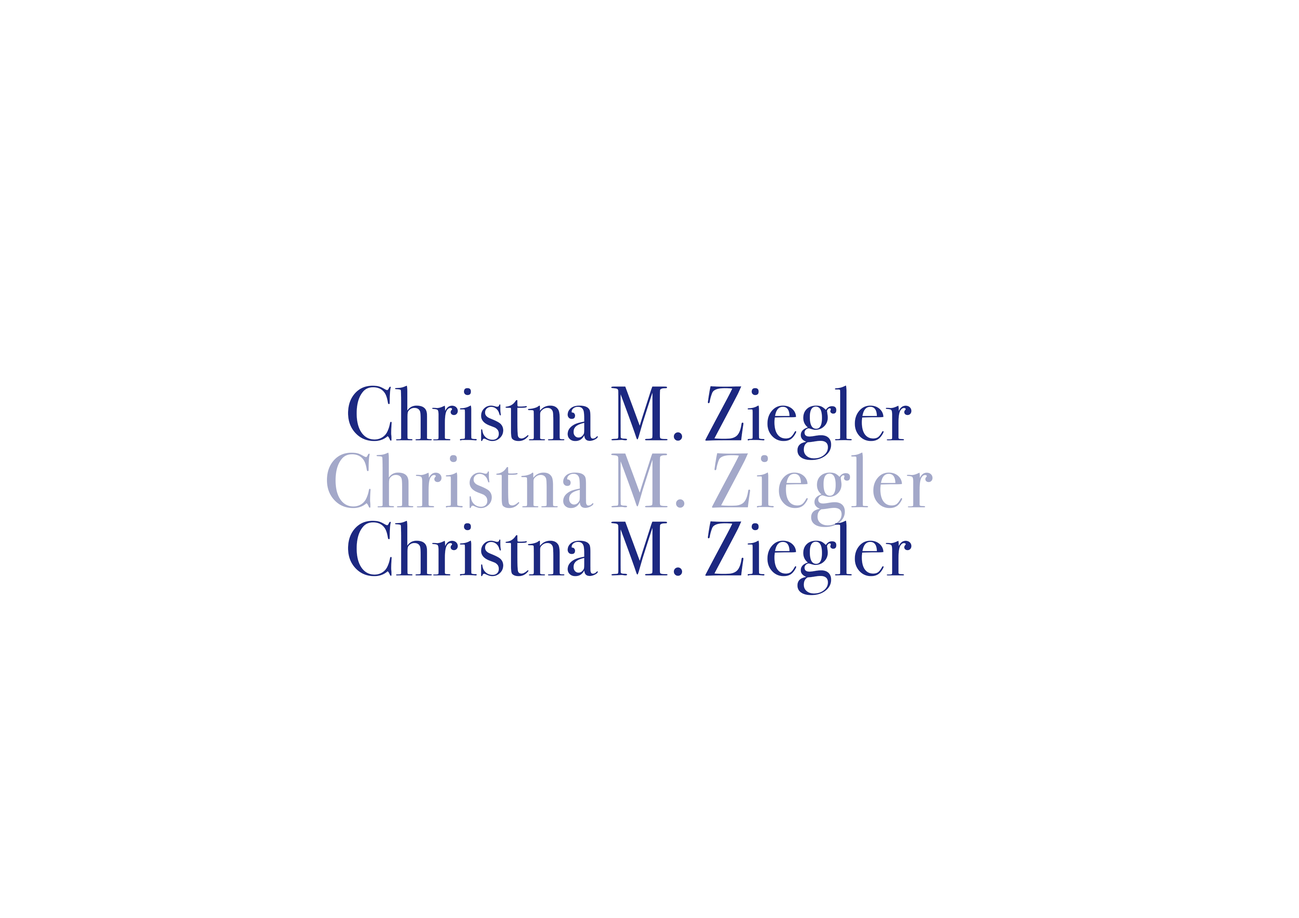
<style>
.page{position:relative;width:1299px;height:918px;background:#ffffff}
.page>*{position:absolute;margin:0}
.t1{font:77.1px "BodoniSvtyTwoITCTT-Book";color:#1c2881}
.t2{font:77.1px "BodoniSvtyTwoITCTT-Book";letter-spacing:0.03em;color:#a3a8c9}
</style>
<div class="page">
<p class="t1" style="left:348px;top:385px;width:563px;height:75px">Christna M. Ziegler</p>
<p class="t2" style="left:327px;top:452px;width:606px;height:75px">Christna M. Ziegler</p>
<p class="t1" style="left:348px;top:521px;width:563px;height:74px">Christna M. Ziegler</p>
</div>
